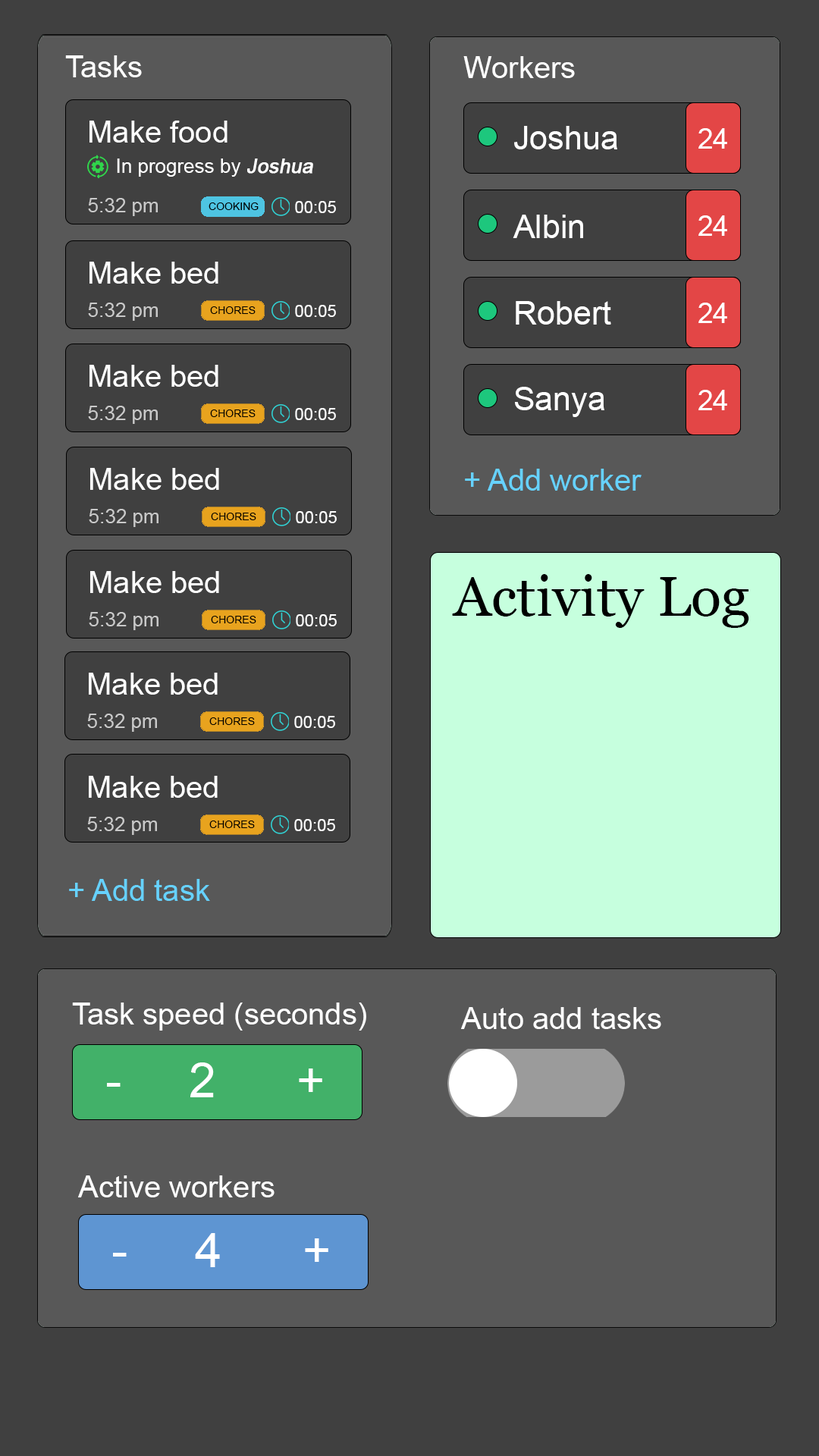
<style>
.page{position:relative;width:819px;height:1456px;background:#404040}
.page>*{position:absolute;margin:0}
.t1{font:30.3px "ArialMT";color:#ffffff}
.t2{font:32.6px "ArialMT";color:#ffffff}
.t3{font:28.1px "ArialMT";color:#ffffff}
.t4{font:19.7px "ArialMT";color:#ffffff}
.t5{font:19.7px "ArialMT";color:#ffffff;font-weight:bold;font-style:italic}
.t6{font:19.7px "ArialMT";color:#c9c9c9}
.t7{font:10.6px "ArialMT";color:#000000;text-transform:uppercase}
.t8{font:16.7px "ArialMT";color:#ffffff}
.t9{font:30.3px "ArialMT";color:#66d2ff}
.t10{font:56.1px "Georgia";color:#000000}
.t11{font:48.5px "ArialMT";color:#ffffff}
</style>
<div class="page">
<p class="t1" style="left:65px;top:55px;width:77px;height:22px">Tasks</p>
<p class="t1" style="left:463px;top:56px;width:112px;height:22px">Workers</p>
<p class="t1" style="left:89px;top:121px;width:138px;height:22px">Make food</p>
<p class="t2" style="left:514px;top:126px;width:103px;height:23px">Joshua</p>
<p class="t3" style="left:698px;top:128px;width:29px;height:21px">24</p>
<p class="t4" style="left:117px;top:158px;width:196px;height:19px">In progress by <span class="t5">Joshua</span></p>
<p class="t6" style="left:88px;top:198px;width:70px;height:18px">5:32 pm</p>
<p class="t7" style="left:209px;top:202px;width:50px;height:8px">COOKING</p>
<p class="t8" style="left:295px;top:201px;width:41px;height:12px">00:05</p>
<p class="t2" style="left:513px;top:215px;width:70px;height:23px">Albin</p>
<p class="t3" style="left:698px;top:215px;width:29px;height:21px">24</p>
<p class="t1" style="left:89px;top:262px;width:129px;height:22px">Make bed</p>
<p class="t6" style="left:88px;top:303px;width:70px;height:18px">5:32 pm</p>
<p class="t8" style="left:295px;top:305px;width:41px;height:12px">00:05</p>
<p class="t2" style="left:516px;top:301px;width:95px;height:24px">Robert</p>
<p class="t3" style="left:698px;top:303px;width:29px;height:20px">24</p>
<p class="t7" style="left:210px;top:306px;width:46px;height:8px">Chores</p>
<p class="t1" style="left:89px;top:365px;width:129px;height:22px">Make bed</p>
<p class="t2" style="left:515px;top:387px;width:89px;height:30px">Sanya</p>
<p class="t3" style="left:698px;top:390px;width:29px;height:20px">24</p>
<p class="t6" style="left:88px;top:406px;width:70px;height:18px">5:32 pm</p>
<p class="t7" style="left:210px;top:409px;width:46px;height:8px">Chores</p>
<p class="t8" style="left:295px;top:408px;width:41px;height:12px">00:05</p>
<p class="t1" style="left:90px;top:468px;width:129px;height:22px">Make bed</p>
<p class="t9" style="left:465px;top:469px;width:177px;height:22px">+ Add worker</p>
<p class="t6" style="left:89px;top:509px;width:69px;height:18px">5:32 pm</p>
<p class="t7" style="left:211px;top:513px;width:45px;height:7px">Chores</p>
<p class="t8" style="left:296px;top:511px;width:41px;height:12px">00:05</p>
<p class="t1" style="left:90px;top:571px;width:129px;height:22px">Make bed</p>
<p class="t10" style="left:452px;top:574px;width:297px;height:54px">Activity Log</p>
<p class="t6" style="left:89px;top:612px;width:69px;height:18px">5:32 pm</p>
<p class="t7" style="left:211px;top:616px;width:45px;height:7px">Chores</p>
<p class="t8" style="left:296px;top:614px;width:41px;height:12px">00:05</p>
<p class="t1" style="left:89px;top:673px;width:129px;height:22px">Make bed</p>
<p class="t6" style="left:87px;top:714px;width:70px;height:18px">5:32 pm</p>
<p class="t7" style="left:209px;top:717px;width:46px;height:8px">Chores</p>
<p class="t8" style="left:294px;top:716px;width:41px;height:12px">00:05</p>
<p class="t1" style="left:89px;top:776px;width:129px;height:22px">Make bed</p>
<p class="t6" style="left:87px;top:817px;width:70px;height:18px">5:32 pm</p>
<p class="t7" style="left:209px;top:821px;width:46px;height:7px">Chores</p>
<p class="t8" style="left:294px;top:819px;width:41px;height:12px">00:05</p>
<p class="t9" style="left:69px;top:879px;width:141px;height:22px">+ Add task</p>
<p class="t1" style="left:72px;top:1003px;width:294px;height:28px">Task speed (seconds)</p>
<p class="t1" style="left:461px;top:1007px;width:200px;height:22px">Auto add tasks</p>
<p class="t11" style="left:107px;top:1062px;width:215px;height:35px">-     2      +</p>
<p class="t1" style="left:78px;top:1175px;width:197px;height:22px">Active workers</p>
<p class="t11" style="left:113px;top:1233px;width:215px;height:34px">-     4      +</p>
</div>
